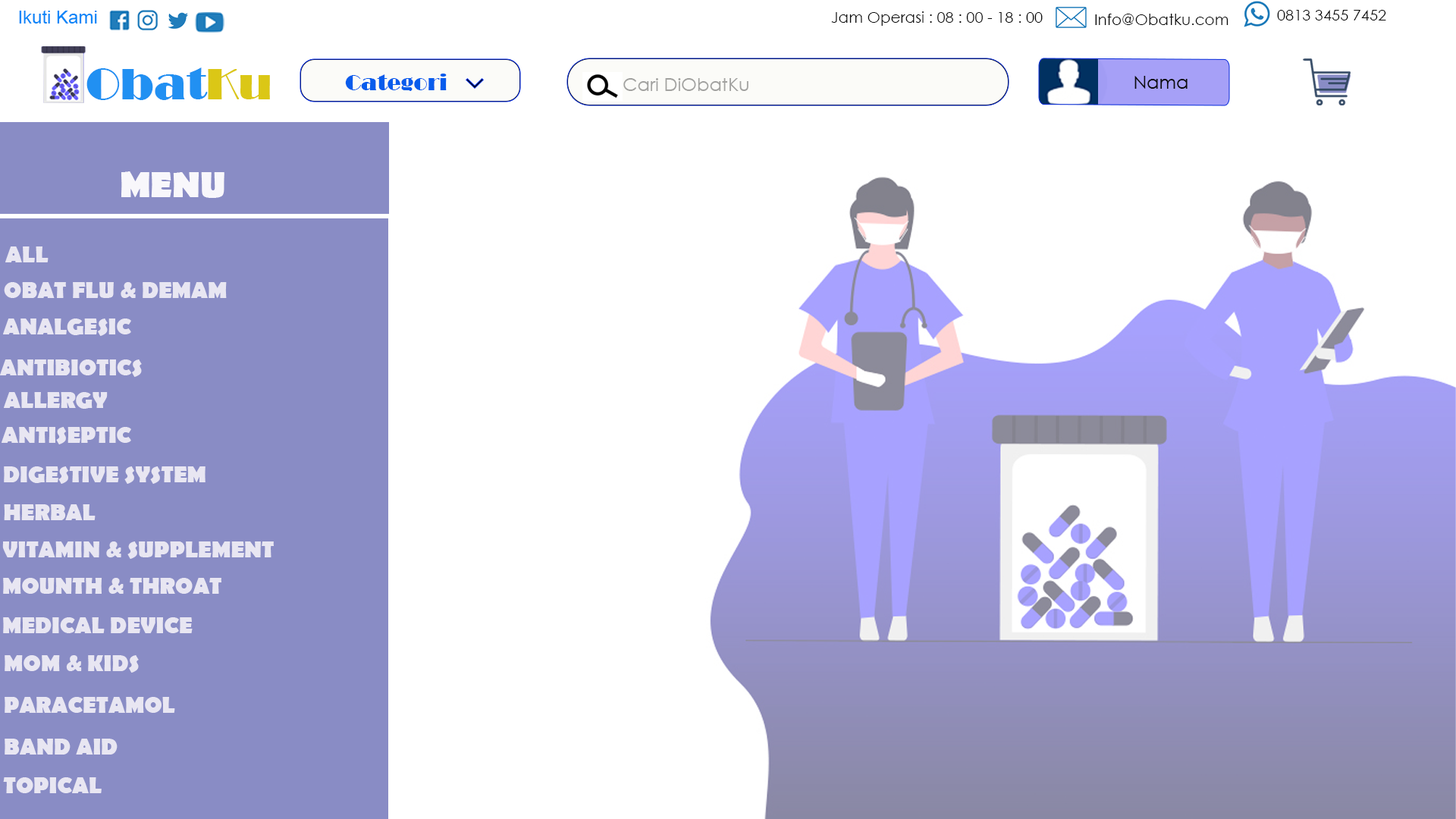
<style>
.page{position:relative;width:1456px;height:819px;background:#ffffff}
.page>*{position:absolute;margin:0}
.t1{font:18.2px "ArialMT";color:#0586f8}
.t2{font:15.2px "CenturyGothic";color:#0a0a0a}
.t3{font:45.5px "Broadway";color:#2190f2}
.t4{font:45.5px "Broadway";color:#dbc716}
.t5{font:22.7px "Broadway";color:#085cec}
.t6{font:18.2px "CenturyGothic";color:#0d0d0d}
.t7{font:18.2px "CenturyGothic";color:#a2a2a0}
.t8{font:36.4px "BerlinSansFB-Bold";color:#f8f7fb}
.t9{font:22.7px "BerlinSansFB-Bold";color:#e8e6f2}
</style>
<div class="page">
<p class="t1" style="left:19px;top:10px;width:78px;height:14px">Ikuti Kami</p>
<p class="t2" style="left:831px;top:11px;width:212px;height:15px">Jam Operasi : 08 : 00 - 18 : 00</p>
<p class="t2" style="left:1095px;top:14px;width:133px;height:11px">Info@Obatku.com</p>
<p class="t2" style="left:1277px;top:10px;width:109px;height:10px">0813 3455 7452</p>
<p class="t3" style="left:86px;top:67px;width:184px;height:33px">Obat<span class="t4">Ku</span></p>
<p class="t5" style="left:345px;top:74px;width:102px;height:17px">Categori</p>
<p class="t6" style="left:1134px;top:76px;width:54px;height:13px">Nama</p>
<p class="t7" style="left:623px;top:78px;width:125px;height:13px">Cari DiObatKu</p>
<p class="t8" style="left:121px;top:171px;width:103px;height:27px">MENU</p>
<p class="t9" style="left:5px;top:246px;width:44px;height:16px">ALL</p>
<p class="t9" style="left:4px;top:282px;width:223px;height:16px">OBAT FLU &amp; DEMAM</p>
<p class="t9" style="left:3px;top:318px;width:128px;height:18px">ANALGESIC</p>
<p class="t9" style="left:0px;top:359px;width:142px;height:18px">ANTIBIOTICS</p>
<p class="t9" style="left:4px;top:392px;width:104px;height:17px">ALLERGY</p>
<p class="t9" style="left:2px;top:427px;width:129px;height:17px">ANTISEPTIC</p>
<p class="t9" style="left:4px;top:466px;width:202px;height:18px">DIGESTIVE SYSTEM</p>
<p class="t9" style="left:4px;top:504px;width:92px;height:16px">HERBAL</p>
<p class="t9" style="left:2px;top:541px;width:272px;height:18px">VITAMIN &amp; SUPPLEMENT</p>
<p class="t9" style="left:3px;top:578px;width:218px;height:16px">MOUNTH &amp; THROAT</p>
<p class="t9" style="left:3px;top:617px;width:190px;height:16px">MEDICAL DEVICE</p>
<p class="t9" style="left:5px;top:655px;width:134px;height:18px">MOM &amp; KIDS</p>
<p class="t9" style="left:5px;top:697px;width:170px;height:16px">PARACETAMOL</p>
<p class="t9" style="left:5px;top:739px;width:113px;height:16px">BAND AID</p>
<p class="t9" style="left:3px;top:777px;width:99px;height:16px">TOPICAL</p>
</div>
